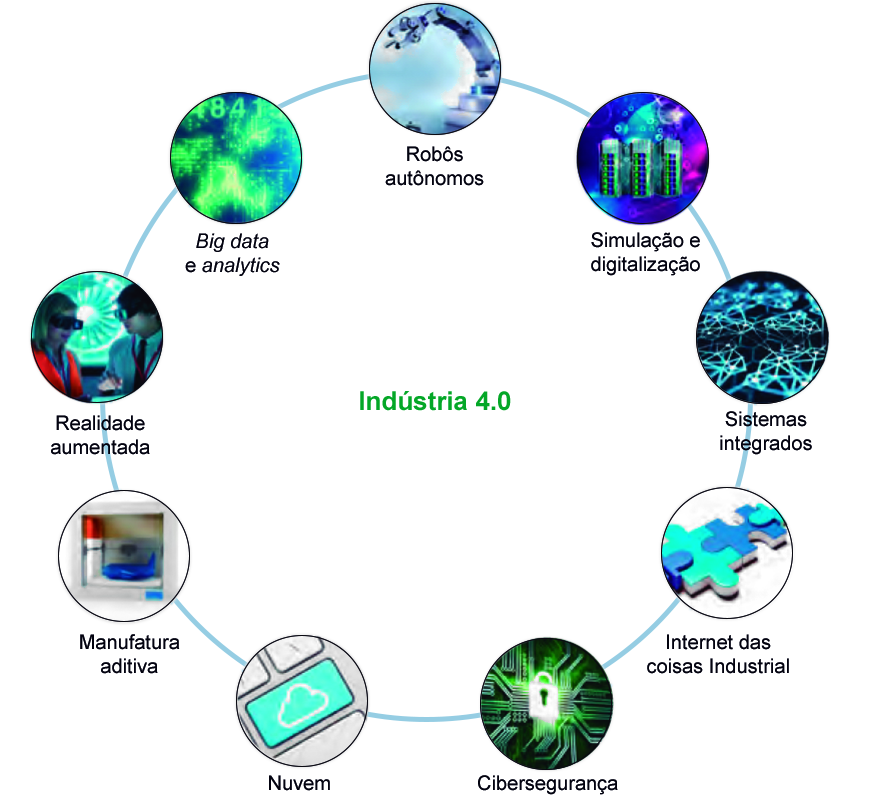
<style>
.page{position:relative;width:893px;height:801px;background:#ffffff}
.page>*{position:absolute;margin:0}
.t1{font:20px "ArialMT";color:#03030f}
.t2{font:20px "Arial-ItalicMT";color:#03030f}
.t3{font:26px "Arial-BoldMT";color:#04a727}
</style>
<div class="page">
<p class="t1" style="left:385px;top:146px;width:99px;height:40px;text-align:center">Robôs<br>autônomos</p>
<p class="t2" style="left:185px;top:233px;width:95px;height:43px;text-align:center">Big data<span class="t1"><br>e </span>analytics</p>
<p class="t1" style="left:591px;top:232px;width:109px;height:44px;text-align:center">Simulação e<br>digitalização</p>
<p class="t3" style="left:360px;top:391px;width:151px;height:20px">Indústria 4.0</p>
<p class="t1" style="left:720px;top:411px;width:92px;height:44px;text-align:center">Sistemas<br>integrados</p>
<p class="t1" style="left:51px;top:415px;width:99px;height:40px;text-align:center">Realidade<br>aumentada</p>
<p class="t1" style="left:80px;top:634px;width:100px;height:40px;text-align:center">Manufatura<br>aditiva</p>
<p class="t1" style="left:647px;top:634px;width:142px;height:40px;text-align:center">Internet das<br>coisas Industrial</p>
<p class="t1" style="left:269px;top:775px;width:61px;height:16px">Nuvem</p>
<p class="t1" style="left:478px;top:775px;width:140px;height:20px">Cibersegurança</p>
</div>
